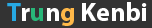
<style>
.page{position:relative;width:152px;height:28px;background:#333333}
.page>*{position:absolute;margin:0}
.t1{font:26px "MyriadPro-Bold";color:#ffffff}
.t2{font:26px "MyriadPro-Bold";color:#27a9e3}
.t3{font:26px "MyriadPro-Bold";color:#28b779}
.t4{font:26px "MyriadPro-Bold";color:#ffb848}
</style>
<div class="page">
<p class="t1" style="left:7px;top:2px;width:140px;height:24px"><span class="t2">T</span>r<span class="t3">u</span>n<span class="t4">g </span>Kenbi</p>
</div>
